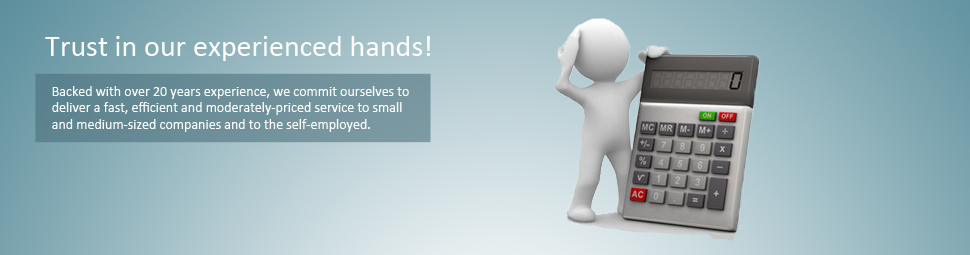
<style>
.page{position:relative;width:970px;height:255px}
.page>*{position:absolute;margin:0}
.t1{font:30px "Calibri";color:#ffffff}
.t2{font:14px "Calibri";color:#ffffff}
</style>
<div class="page">
<p class="t1" style="left:45px;top:36px;width:385px;height:25px">Trust in our experienced hands!</p>
<p class="t2" style="left:52px;top:86px;width:357px;height:46px">Backed with over 20 years experience, we commit ourselves to <br>deliver a fast, efficient and moderately-priced service to small <br>and medium-sized companies and to the self-employed.</p>
</div>
